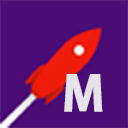
<style>
.page{position:relative;width:128px;height:128px;background:#4b0c75}
.page>*{position:absolute;margin:0}
.t1{font:48px "AdobeGothicStd-Bold";letter-spacing:-0.075em;color:#e6e3eb;font-weight:bold}
</style>
<div class="page">
<p class="t1" style="left:64px;top:74px;width:39px;height:38px">M</p>
</div>
